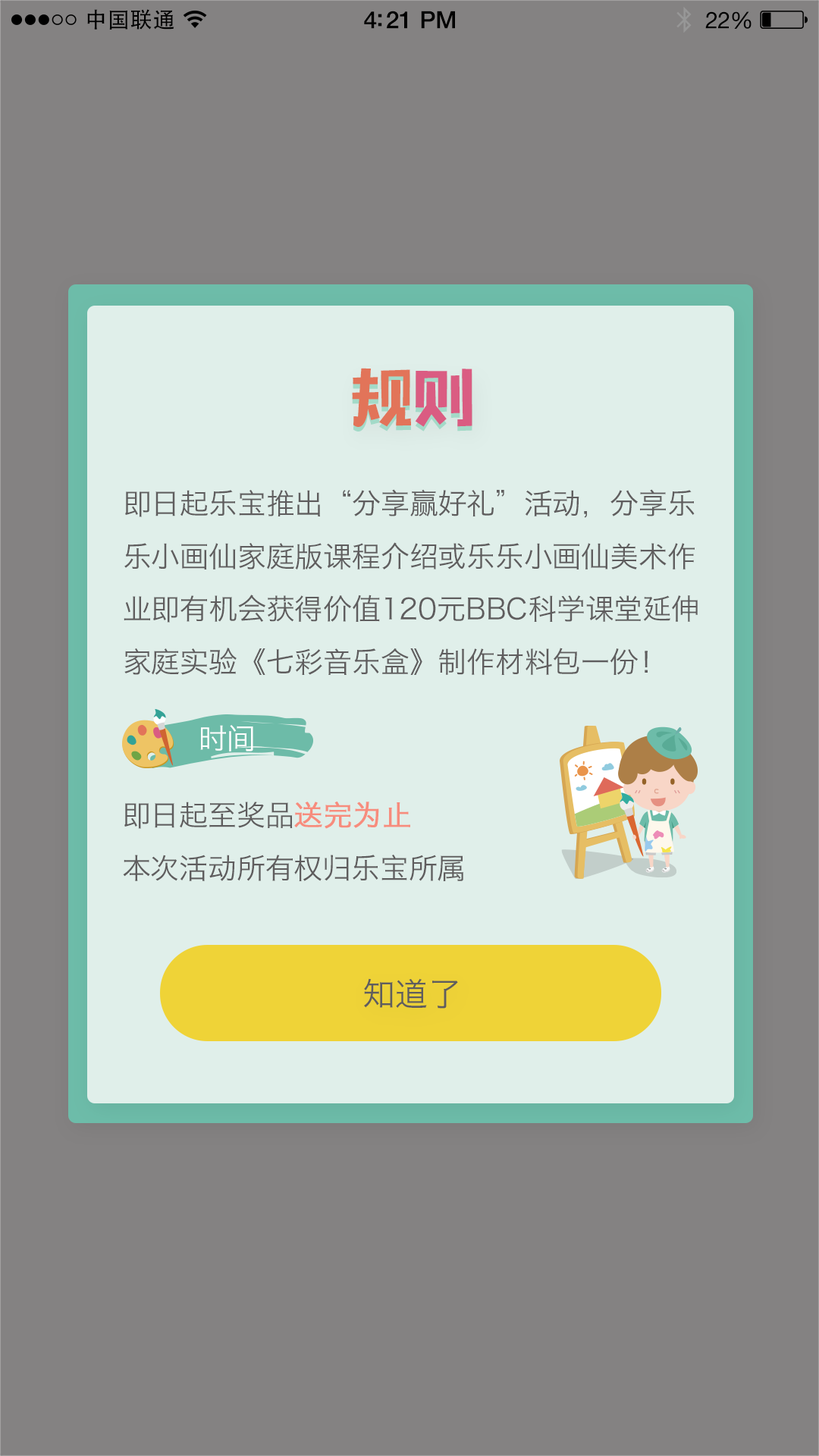
<style>
.page{position:relative;width:819px;height:1456px;background:#848282}
.page>*{position:absolute;margin:0}
.t1{font:22px "AdobeHeitiStd-Regular";letter-spacing:0.02em;color:#000000}
.t2{font:23.9px "HelveticaNeue-Medium";letter-spacing:-0.02em;color:#000000}
.t3{font:22.9px "HelveticaNeue";letter-spacing:-0.02em;color:#000000}
.t4{font:63.1px "MFTongXin_Noncommercial-Regular";letter-spacing:-0.006em;color:#e27459}
.t5{font:63.1px "MFTongXin_Noncommercial-Regular";letter-spacing:-0.006em;color:#da5c82}
.t6{font:28.8px/52.9px "HiraginoSansGB-W3";letter-spacing:-0.006em;color:#5f5d5e}
.t7{font:28.8px "HiraginoSansGB-W3";letter-spacing:-0.006em;color:#ffffff}
.t8{font:28.8px/52.9px "HiraginoSansGB-W3";letter-spacing:-0.006em;color:#f78c7d;font-weight:bold}
.t9{font:32.7px "HiraginoSansGB-W3";color:#5f5d5e}
</style>
<div class="page">
<p class="t1" style="left:87px;top:9px;width:87px;height:21px">中国联通</p>
<p class="t2" style="left:364px;top:11px;width:91px;height:18px">4:21 PM</p>
<p class="t3" style="left:705px;top:11px;width:46px;height:18px">22%</p>
<p class="t4" style="left:352px;top:372px;width:120px;height:59px">规<span class="t5">则</span></p>
<p class="t4" style="left:352px;top:368px;width:120px;height:59px">规<span class="t5">则</span></p>
<p class="t6" style="left:124px;top:489px;width:574px;height:186px">即日起乐宝推出“分享赢好礼”活动，分享乐<br>乐小画仙家庭版课程介绍或乐乐小画仙美术作<br>业即有机会获得价值120元BBC科学课堂延伸<br>家庭实验《七彩音乐盒》制作材料包一份！</p>
<p class="t7" style="left:200px;top:725px;width:53px;height:26px">时间</p>
<p class="t6" style="left:123px;top:802px;width:340px;height:79px">即日起至奖品<span class="t8">送完为止<br></span>本次活动所有权归乐宝所属</p>
<p class="t9" style="left:364px;top:978px;width:94px;height:31px">知道了</p>
</div>
